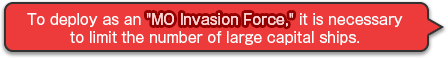
<style>
.page{position:relative;width:448px;height:58px;background:#ed3b3b}
.page>*{position:absolute;margin:0}
.t1{font:14px/18px "GothicMB101Pro-Regular";color:#ffffff}
.t2{font:14px/18px "GothicMB101Pro-Regular";color:#ffd3d3}
</style>
<div class="page">
<p class="t1" style="left:27px;top:13px;width:376px;height:32px;text-align:center">To deploy as an <span class="t2">"MO Invasion Force,"</span> it is necessary<br>to limit the number of large capital ships.</p>
<p class="t1" style="left:27px;top:13px;width:376px;height:32px;text-align:center">To deploy as an <span class="t2">"MO Invasion Force,"</span> it is necessary<br>to limit the number of large capital ships.</p>
</div>
